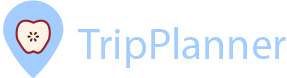
<style>
.page{position:relative;width:287px;height:78px;background:#ffffff}
.page>*{position:absolute;margin:0}
.t1{font:43.8px "MyriadPro-Regular";color:#a3ccff}
</style>
<div class="page">
<p class="t1" style="left:78px;top:27px;width:208px;height:41px">TripPlanner</p>
</div>
